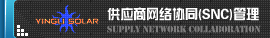
<style>
.page{position:relative;width:270px;height:38px}
.page>*{position:absolute;margin:0}
.t1{font:9.7px/16px "Stencil";letter-spacing:-0.025em;color:#7d7c7c}
.t2{font:13.9px/16px "FZZYJW--GB1-0";letter-spacing:-0.025em;color:#ffffff;scale:0.96 1}
</style>
<div class="page">
<p class="t1" style="left:107px;top:7px;width:154px;height:26px"><span class="t2">供应商网络协同(SNC)管理<br></span>Supply Network Collaboration</p>
</div>
